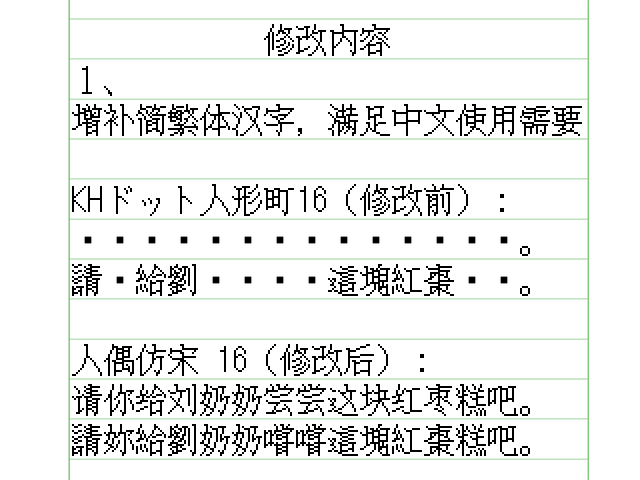
<style>
.page{position:relative;width:640px;height:480px;background:#ffffff}
.page>*{position:absolute;margin:0}
.t1{font:32px/40px "RenOuFangSong-16";color:#000000}
.t2{font:32px/40px "KH-Dot-Ningyouchou-16";color:#000000}
</style>
<div class="page">
<p class="t1" style="left:72px;top:24px;width:510px;height:432px">修改内容<br>１、<br>增补简繁体汉字，满足中文使用需要<br><br><span class="t2">KHドット人形町16</span>（修改前）<span class="t2">：<br>请你给刘奶奶尝尝这块红枣糕吧。<br>請妳給劉奶奶嚐嚐這塊紅棗糕吧。<br><br></span>人偶仿宋 16（修改后）：<br>请你给刘奶奶尝尝这块红枣糕吧。<br>請妳給劉奶奶嚐嚐這塊紅棗糕吧。</p>
</div>
